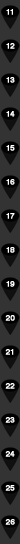
<style>
.page{position:relative;width:20px;height:544px;background:#333333}
.page>*{position:absolute;margin:0}
.t1{font:8px/34px "Helvetica-Bold";letter-spacing:-0.035em;color:#ffffff;text-transform:uppercase;font-weight:bold}
</style>
<div class="page">
<p class="t1" style="left:5px;top:9px;width:10px;height:516px;text-align:center">11<br>12<br>13<br>14<br>15<br>16<br>17<br>18<br>19<br>20<br>21<br>22<br>23<br>24<br>25<br>26</p>
</div>
